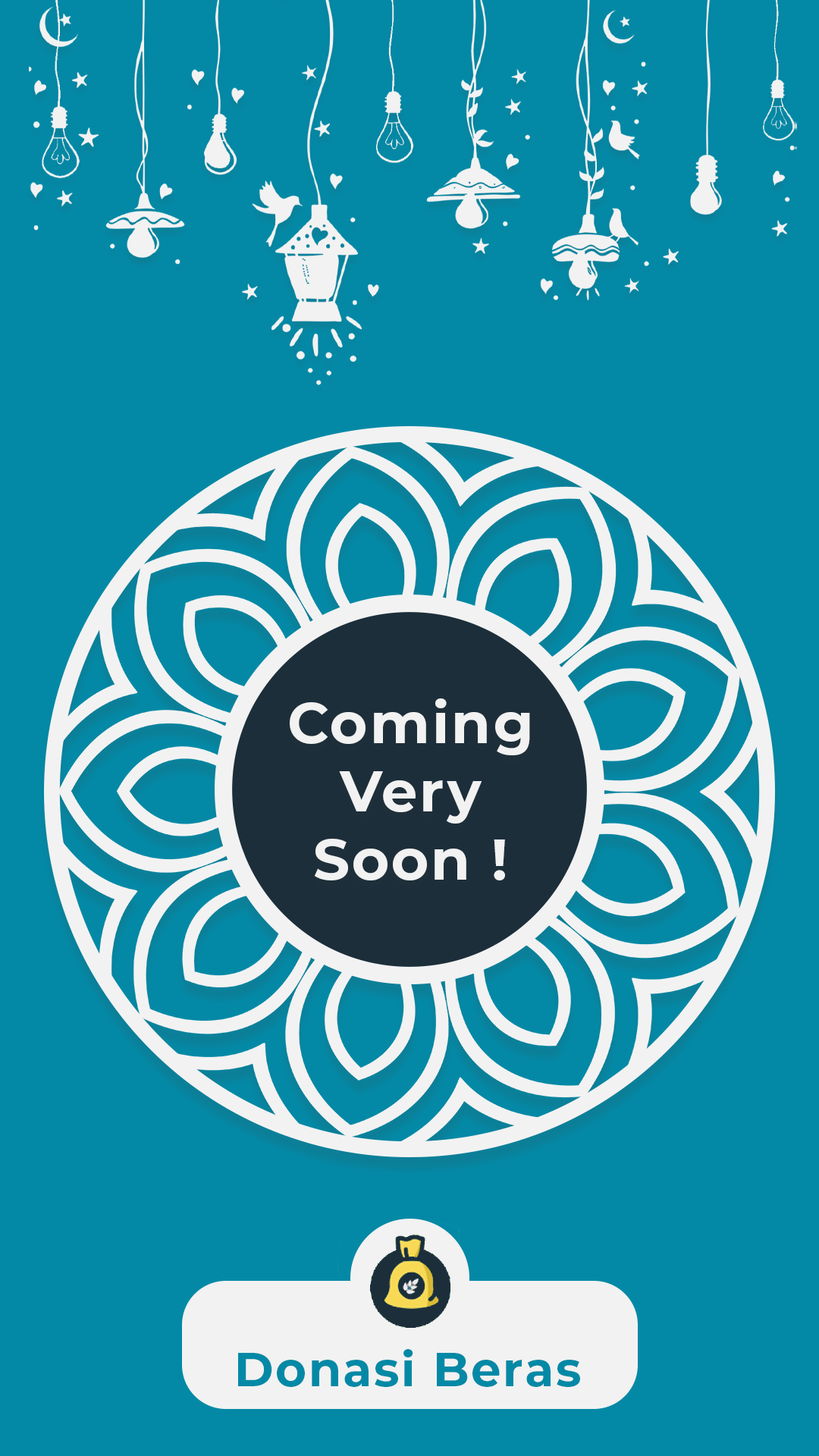
<style>
.page{position:relative;width:819px;height:1456px;background:#0389a6}
.page>*{position:absolute;margin:0}
.t1{font:57.1px "Montserrat-Bold";letter-spacing:0.04em;color:#f2f2f2}
.t2{font:47.4px "Montserrat-Bold";letter-spacing:0.04em;color:#0389a6}
</style>
<div class="page">
<p class="t1" style="left:290px;top:698px;width:240px;height:182px;text-align:center">Coming<br>Very<br>Soon !</p>
<p class="t2" style="left:238px;top:1349px;width:342px;height:38px">Donasi Beras</p>
</div>
